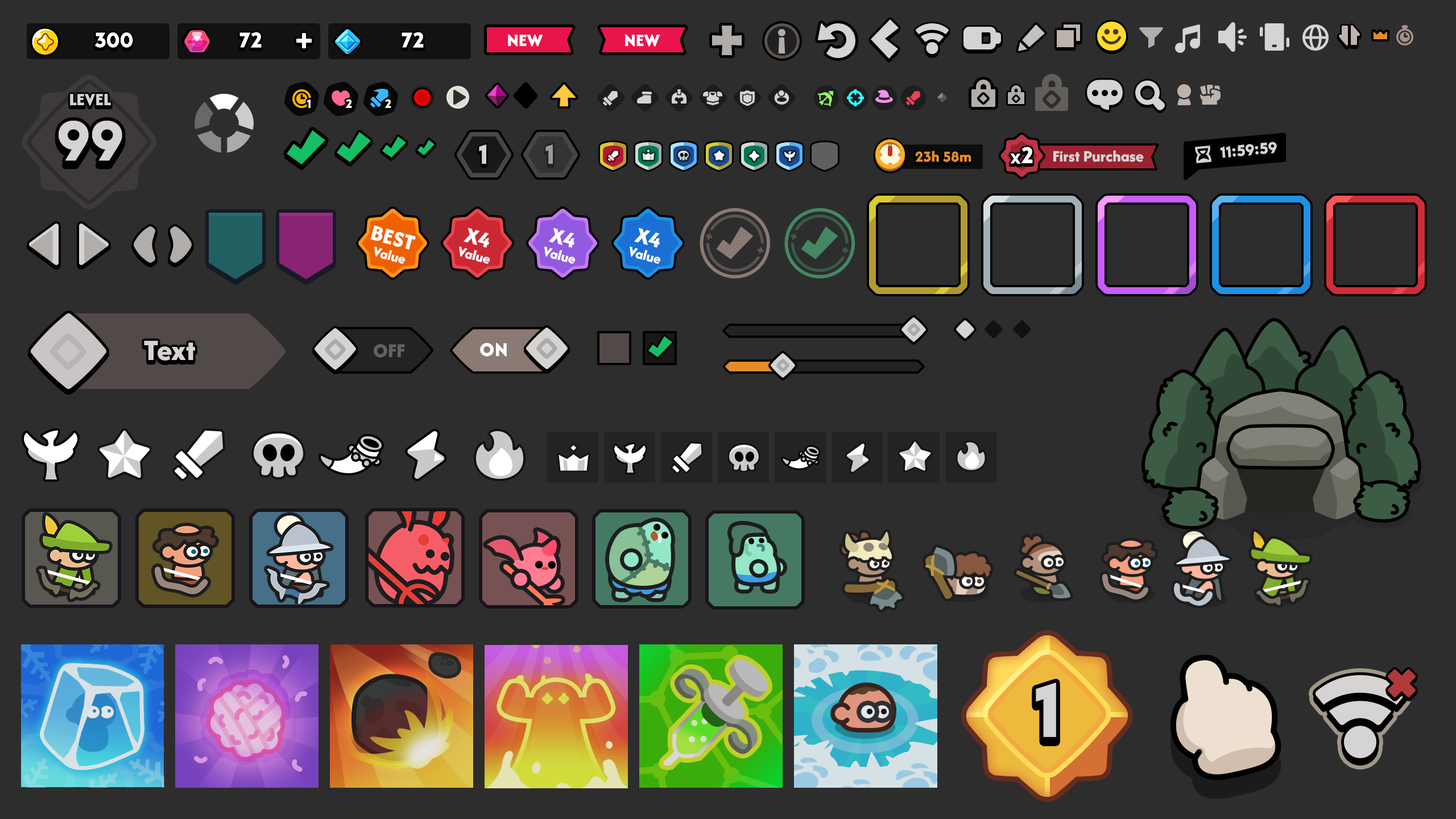
<style>
.page{position:relative;width:1456px;height:819px;background:#2d2d2d}
.page>*{position:absolute;margin:0}
.t1{font:22.2px "LTAvocado-Bold";color:#ffffff}
.t2{font:18.2px "AfacadFlux-ExtraBold";color:#ffffff;text-transform:uppercase}
.t3{font:18px "AfacadFlux-ExtraBold";color:#d6d4d3;text-transform:uppercase}
.t4{font:12.5px "LTAvocado-Bold";color:#ffffff;text-transform:uppercase}
.t5{font:58.5px "LTAvocado-Bold";color:#d6d4d3;text-transform:uppercase}
.t6{font:28.4px "LTAvocado-Bold";color:#d6d4d3;text-transform:uppercase}
.t7{font:28.4px "LTAvocado-Bold";color:#9a9a9a;text-transform:uppercase}
.t8{font:21.5px "LTAvocado-Bold";letter-spacing:-0.025em;color:#ffffff}
.t9{font:23.7px "LTAvocado-Bold";letter-spacing:-0.025em;color:#ffffff}
.t10{font:16.4px "LTAvocado-Bold";letter-spacing:-0.01em;color:#d6d4d3}
.t11{font:15.9px "AfacadFlux-ExtraBold";color:#e28d27}
.t12{font:16.5px "AfacadFlux-ExtraBold";color:#d6d4d3}
.t13{font:22.7px "AfacadFlux-ExtraBold";color:#ffffff;text-transform:uppercase}
.t14{font:14.8px "AfacadFlux-ExtraBold";color:#ffffff}
.t15{font:30.7px "AfacadFlux-ExtraBold";color:#d6d4d3}
.t16{font:20.5px "AfacadFlux-ExtraBold";color:#626262;text-transform:uppercase}
.t17{font:20.5px "AfacadFlux-ExtraBold";color:#ffffff;text-transform:uppercase}
.t18{font:79.6px "LTAvocado-Bold";color:#d6d4d3;text-transform:uppercase}
</style>
<div class="page">
<p class="t1" style="left:95px;top:32px;width:38px;height:16px">300</p>
<p class="t1" style="left:239px;top:32px;width:23px;height:16px">72</p>
<p class="t1" style="left:402px;top:32px;width:22px;height:16px">72</p>
<p class="t2" style="left:508px;top:34px;width:35px;height:13px">New</p>
<p class="t2" style="left:625px;top:34px;width:35px;height:13px">New</p>
<p class="t3" style="left:70px;top:94px;width:41px;height:12px">Level</p>
<p class="t4" style="left:307px;top:99px;width:4px;height:9px">1</p>
<p class="t4" style="left:345px;top:99px;width:7px;height:9px">2</p>
<p class="t4" style="left:384px;top:99px;width:7px;height:9px">2</p>
<p class="t5" style="left:59px;top:121px;width:63px;height:40px">99</p>
<p class="t6" style="left:479px;top:144px;width:7px;height:20px">1</p>
<p class="t7" style="left:545px;top:144px;width:8px;height:20px">1</p>
<p class="t8" style="left:1010px;top:147px;width:23px;height:17px">x<span class="t9">2</span></p>
<p class="t10" style="left:1220px;top:142px;width:57px;height:16px;rotate:-5deg">11:59:59</p>
<p class="t11" style="left:915px;top:151px;width:56px;height:11px">23h 58m</p>
<p class="t12" style="left:1053px;top:150px;width:91px;height:12px">First Purchase</p>
<p class="t13" style="left:370px;top:225px;width:46px;height:25px;rotate:15deg">Best</p>
<p class="t13" style="left:463px;top:227px;width:26px;height:21px;rotate:15deg">x4</p>
<p class="t13" style="left:548px;top:227px;width:26px;height:21px;rotate:15deg">x4</p>
<p class="t13" style="left:634px;top:227px;width:26px;height:21px;rotate:15deg">x4</p>
<p class="t14" style="left:374px;top:246px;width:31px;height:18px;rotate:15deg">Value</p>
<p class="t14" style="left:459px;top:246px;width:31px;height:18px;rotate:15deg">Value</p>
<p class="t14" style="left:544px;top:246px;width:31px;height:18px;rotate:15deg">Value</p>
<p class="t14" style="left:630px;top:246px;width:30px;height:18px;rotate:15deg">Value</p>
<p class="t15" style="left:144px;top:341px;width:51px;height:20px">Text</p>
<p class="t16" style="left:374px;top:344px;width:31px;height:14px">OFF</p>
<p class="t17" style="left:480px;top:343px;width:27px;height:14px">ON</p>
<p class="t18" style="left:1036px;top:682px;width:20px;height:55px">1</p>
</div>
